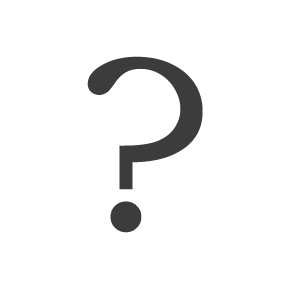
<style>
.page{position:relative;width:288px;height:288px;background:#ffffff}
.page>*{position:absolute;margin:0}
.t1{font:250px "BookmanOldStyle";color:#3c3c3c}
</style>
<div class="page">
<p class="t1" style="left:87px;top:56px;width:116px;height:177px">?</p>
</div>
